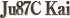
<style>
.page{position:relative;width:70px;height:18px;background:#ffffff}
.page>*{position:absolute;margin:0}
.t1{font:18px "RyuminPro-ExBold";letter-spacing:-0.085em;color:#4a3f32;font-weight:bold;scale:0.9 1}
</style>
<div class="page">
<p class="t1" style="left:0px;top:1px;width:71px;height:18px">Ju87C Kai</p>
</div>
